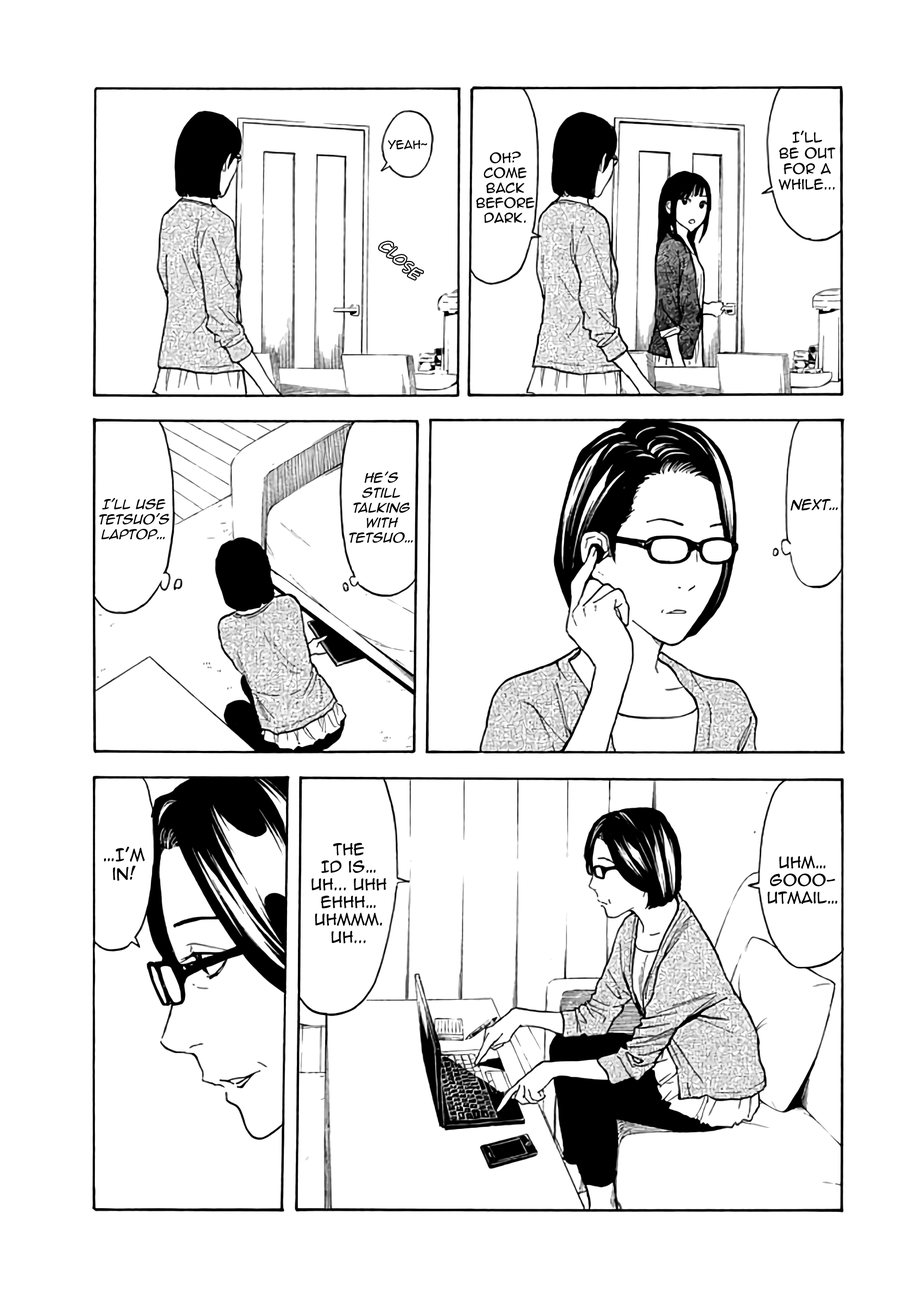
<style>
.page{position:relative;width:916px;height:1302px;background:#ffffff}
.page>*{position:absolute;margin:0}
.t1{font:13px "AnimeAce2.0BB";color:#000000}
.t2{font:10.9px "AnimeAce2.0BB";color:#000000}
.t3{font:12.5px "AnimeAce2.0BB";color:#000000}
.t4{font:12.5px "AnimeAce2.0BB-Italic";color:#000000}
.t5{font:13.6px "AnimeAce2.0BB-Italic";color:#000000}
.t6{font:14.6px "AnimeAce2.0BB";color:#000000}
.t7{font:15.7px "AnimeAce2.0BB";color:#000000}
</style>
<div class="page">
<p class="t1" style="left:779px;top:130px;width:56px;height:60px;text-align:center">I'll <br>be out <br>for a while...</p>
<p class="t2" style="left:388px;top:140px;width:40px;height:10px">Yeah~</p>
<p class="t3" style="left:476px;top:151px;width:59px;height:73px;text-align:center">Oh? <br>Come <br>back <br>before <br>dark.</p>
<p class="t4" style="left:349px;top:471px;width:64px;height:72px;text-align:center">he’s Still <br>talking <br>with <br>tetsuo…</p>
<p class="t4" style="left:99px;top:498px;width:70px;height:42px;text-align:center">I'll use <br>tetsuo's <br>laptop…</p>
<p class="t5" style="left:790px;top:499px;width:48px;height:12px">Next…</p>
<p class="t6" style="left:311px;top:843px;width:76px;height:100px;text-align:center">the <br>ID is… uh... uhh ehhh… uhmmm. <br>Uh...</p>
<p class="t7" style="left:104px;top:846px;width:41px;height:35px;text-align:center">…I'm in!</p>
<p class="t6" style="left:767px;top:856px;width:70px;height:48px;text-align:center">uhm… gooo-<br>utmail…</p>
</div>
